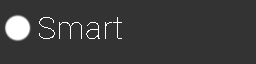
<style>
.page{position:relative;width:256px;height:64px;background:#333333}
.page>*{position:absolute;margin:0}
.t1{font:32px "Roboto-Thin";color:#ffffff}
</style>
<div class="page">
<p class="t1" style="left:39px;top:17px;width:83px;height:22px">Smart</p>
</div>
